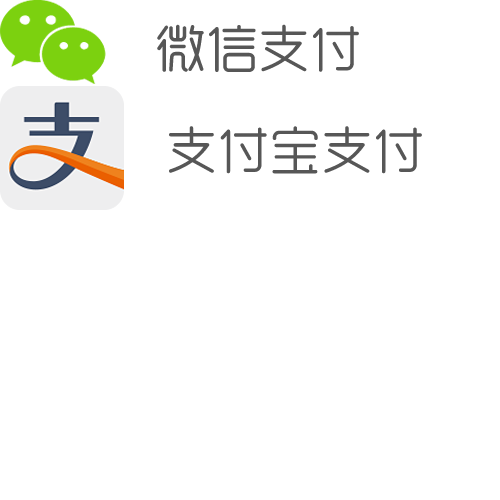
<style>
.page{position:relative;width:500px;height:500px;background:#ffffff}
.page>*{position:absolute;margin:0}
.t1{font:52px "MFYueYuan_Noncommercial-Regular";color:#565656}
</style>
<div class="page">
<p class="t1" style="left:157px;top:24px;width:202px;height:48px">微信支付</p>
<p class="t1" style="left:169px;top:126px;width:253px;height:48px">支付宝支付</p>
</div>
